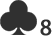
<style>
.page{position:relative;width:55px;height:36px;background:#ffffff}
.page>*{position:absolute;margin:0}
.t1{font:23.4px "MyriadPro-Regular";letter-spacing:-0.1em;color:#303030;font-weight:bold}
</style>
<div class="page">
<p class="t1" style="left:40px;top:19px;width:12px;height:17px">8</p>
</div>
